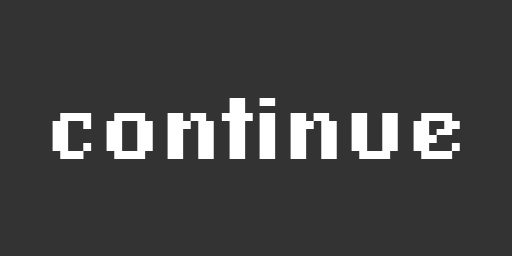
<style>
.page{position:relative;width:512px;height:256px;background:#333333}
.page>*{position:absolute;margin:0}
.t1{font:92px "LoRes12OT-Bold";color:#ffffff}
</style>
<div class="page">
<p class="t1" style="left:52px;top:98px;width:408px;height:61px">continue</p>
</div>
